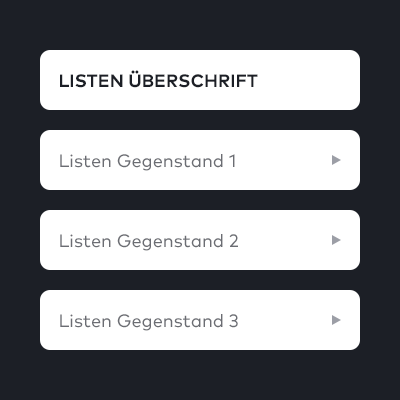
<style>
.page{position:relative;width:400px;height:400px;background:#1c1f26}
.page>*{position:absolute;margin:0}
.t1{font:18px "MarkPro-Bold";color:#1c1f26;text-transform:uppercase}
.t2{font:18px "MarkPro-Book";color:#6b6d73}
</style>
<div class="page">
<p class="t1" style="left:60px;top:70px;width:198px;height:18px">Listen Überschrift</p>
<p class="t2" style="left:60px;top:154px;width:175px;height:17px">Listen Gegenstand 1</p>
<p class="t2" style="left:60px;top:234px;width:178px;height:17px">Listen Gegenstand 2</p>
<p class="t2" style="left:60px;top:314px;width:178px;height:17px">Listen Gegenstand 3</p>
</div>
